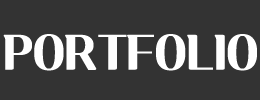
<style>
.page{position:relative;width:260px;height:100px;background:#333333}
.page>*{position:absolute;margin:0}
.t1{font:40px "twaysky";letter-spacing:0.01em;color:#ffffff}
</style>
<div class="page">
<p class="t1" style="left:3px;top:34px;width:254px;height:37px">PORTFOLIO</p>
</div>
